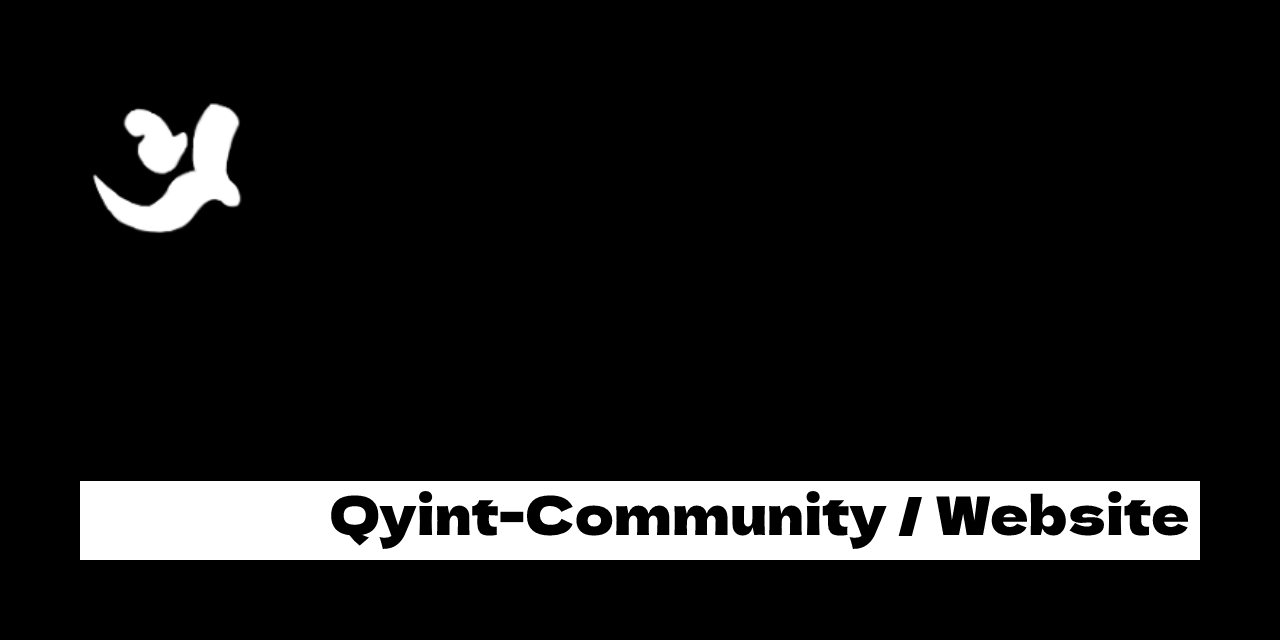
<style>
.page{position:relative;width:1280px;height:640px;background:#000000}
.page>*{position:absolute;margin:0}
.t1{font:53px "DelaGothicOne-Regular";color:#000000}
</style>
<div class="page">
<p class="t1" style="left:331px;top:491px;width:858px;height:59px">Qyint-Community / Website</p>
</div>
